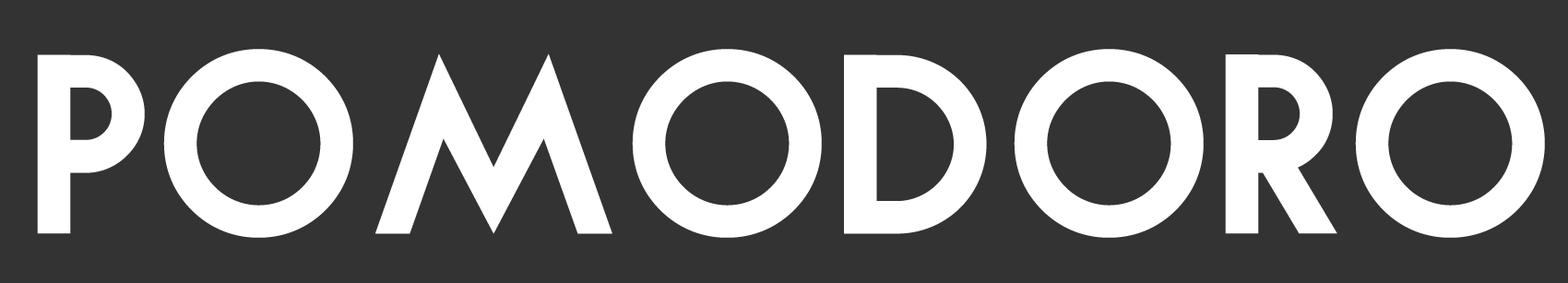
<style>
.page{position:relative;width:1568px;height:283px;background:#333333}
.page>*{position:absolute;margin:0}
.t1{font:317.5px "NOVAegular";letter-spacing:0.04em;color:#ffffff}
</style>
<div class="page">
<p class="t1" style="left:37px;top:49px;width:1508px;height:189px">Pomodoro</p>
</div>
